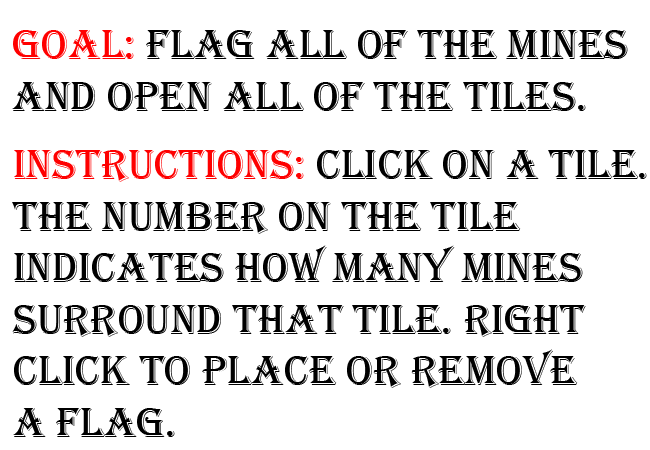
<style>
.page{position:relative;width:650px;height:450px;background:#ffffff}
.page>*{position:absolute;margin:0}
.t1{font:43px "Algerian";color:#000000}
.t2{font:43px "Algerian";color:#ff0000}
.t3{font:43px "Algerian";color:#fe0000}
</style>
<div class="page">
<p class="t1" style="left:12px;top:30px;width:616px;height:81px"><span class="t2">Goal: </span>Flag all of the mines<br>and open all of the tiles.</p>
<p class="t1" style="left:12px;top:150px;width:635px;height:287px"><span class="t3">instructions: </span>click on a tile.<br>the number on the tile <br>indicates how many mines <br>surround that tile. Right <br>click to place or remove <br>a flag.</p>
</div>
